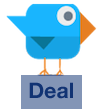
<style>
.page{position:relative;width:100px;height:109px;background:#ffffff}
.page>*{position:absolute;margin:0}
.t1{font:21.3px "HelveticaNeue-Bold";color:#113373}
</style>
<div class="page">
<p class="t1" style="left:29px;top:82px;width:44px;height:17px">Deal</p>
</div>
